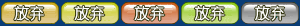
<style>
.page{position:relative;width:300px;height:26px;background:#093c75}
.page>*{position:absolute;margin:0}
.t1{font:15px "YouYuan";letter-spacing:-0.025em;color:#ffffff;font-weight:bold}
</style>
<div class="page">
<p class="t1" style="left:14px;top:5px;width:271px;height:16px">放弃    放弃    放弃    放弃    放弃</p>
</div>
